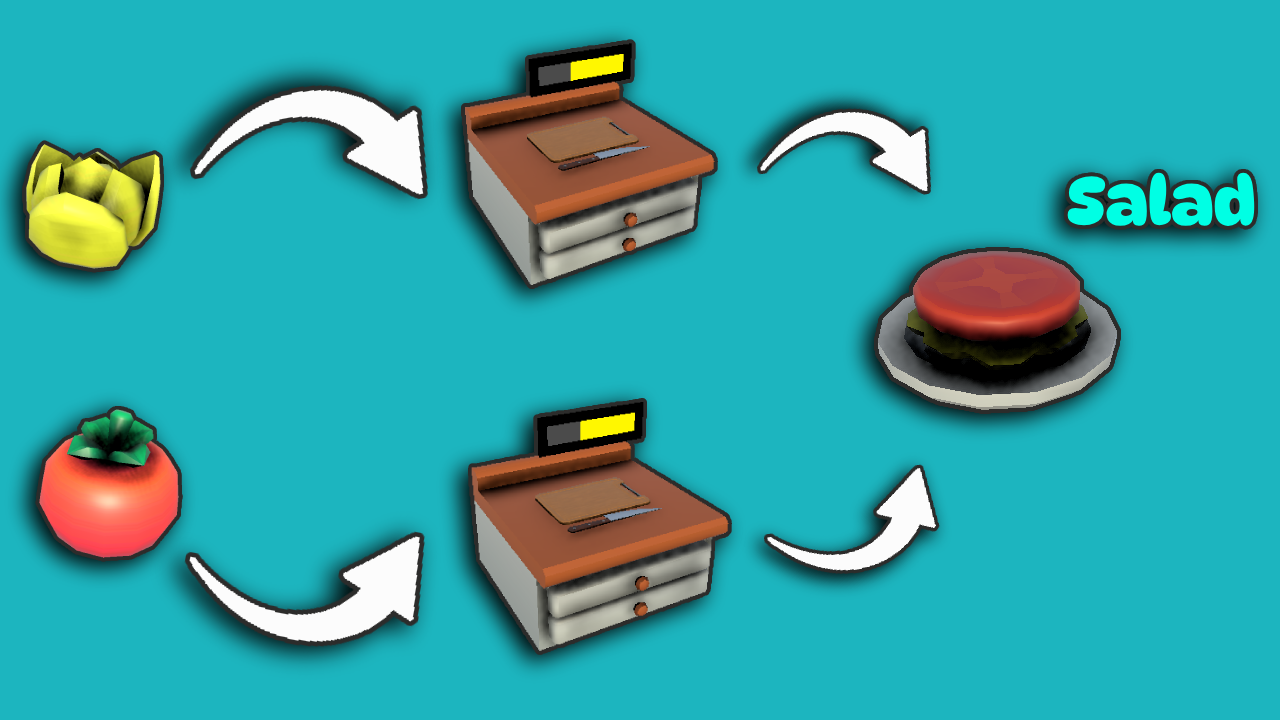
<style>
.page{position:relative;width:1280px;height:720px;background:#1cb5bf}
.page>*{position:absolute;margin:0}
.t1{font:66.2px "DynaPuff-Bold";color:#00ffe4}
</style>
<div class="page">
<p class="t1" style="left:1067px;top:172px;width:188px;height:54px">Salad</p>
</div>
